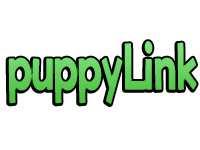
<style>
.page{position:relative;width:200px;height:150px;background:#ffffff}
.page>*{position:absolute;margin:0}
.t1{font:79.7px "TTPinkfongBabySharkB";letter-spacing:-0.05em;scale:0.63 1}
</style>
<div class="page">
<p class="t1" style="left:7px;top:41px;width:190px;height:64px">puppyLink</p>
</div>
